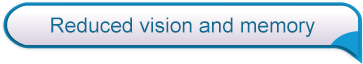
<style>
.page{position:relative;width:363px;height:64px;background:#ffffff}
.page>*{position:absolute;margin:0}
.t1{font:21px "ArialMT";color:#106b93}
</style>
<div class="page">
<p class="t1" style="left:51px;top:17px;width:264px;height:20px">Reduced vision and memory</p>
</div>
